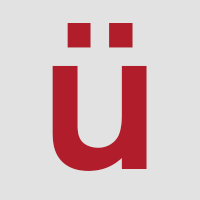
<style>
.page{position:relative;width:200px;height:200px;background:#e2e2e2}
.page>*{position:absolute;margin:0}
.t1{font:206.3px "AkzidenzGroteskBQ-Medium";color:#b11d2b}
</style>
<div class="page">
<p class="t1" style="left:52px;top:23px;width:95px;height:148px">ü</p>
</div>
